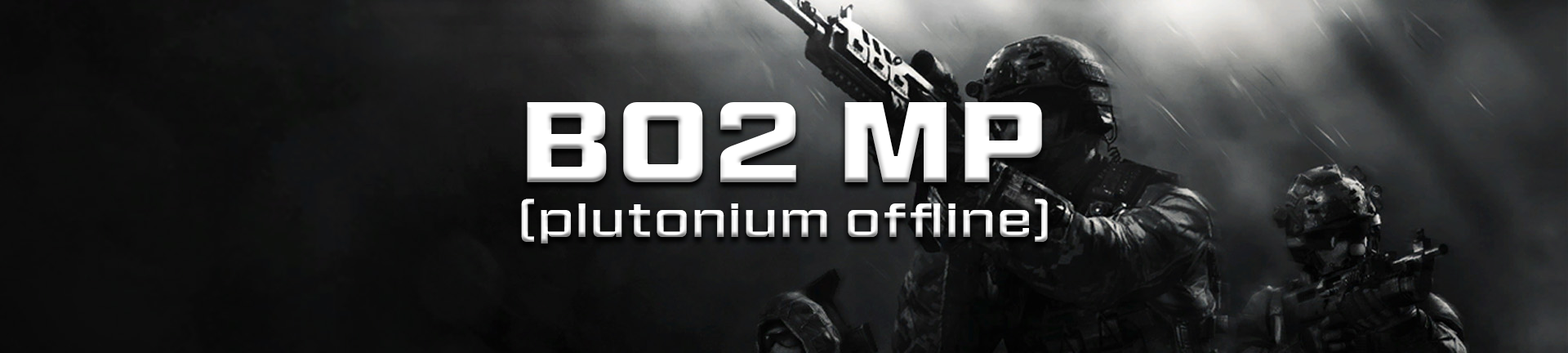
<style>
.page{position:relative;width:1568px;height:353px}
.page>*{position:absolute;margin:0}
.t1{font:106.6px "HitmarkerNormal-Bold";letter-spacing:0.12em;color:#ffffff}
.t2{font:45.4px "HitmarkerNormal-Regular";letter-spacing:0.12em;color:#ffffff}
</style>
<div class="page">
<p class="t1" style="left:527px;top:102px;width:515px;height:80px">BO2 MP</p>
<p class="t2" style="left:521px;top:198px;width:527px;height:45px">(plutonium offline)</p>
</div>
